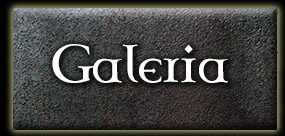
<style>
.page{position:relative;width:285px;height:136px}
.page>*{position:absolute;margin:0}
.t1{font:46.8px "CelticGaramondthe2nd";letter-spacing:0.02em;color:#ffffff;scale:0.93 1}
</style>
<div class="page">
<p class="t1" style="left:52px;top:44px;width:176px;height:39px">Galeria</p>
</div>
